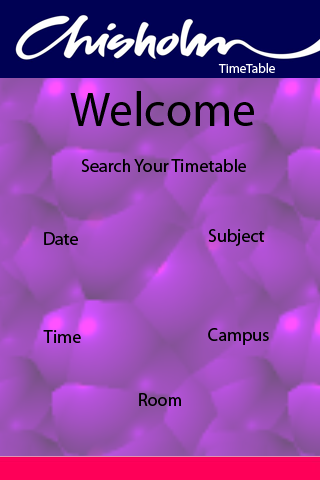
<style>
.page{position:relative;width:320px;height:480px}
.page>*{position:absolute;margin:0}
.t1{font:13.3px "MyriadPro-Regular";color:#ffffff}
.t2{font:48px "MyriadPro-Regular";color:#000000}
.t3{font:18px "MyriadPro-Regular";color:#000000}
</style>
<div class="page">
<p class="t1" style="left:218px;top:63px;width:57px;height:10px">TimeTable</p>
<p class="t2" style="left:70px;top:91px;width:184px;height:35px">Welcome</p>
<p class="t3" style="left:81px;top:159px;width:165px;height:13px">Search Your Timetable</p>
<p class="t3" style="left:44px;top:232px;width:34px;height:13px">Date</p>
<p class="t3" style="left:208px;top:229px;width:57px;height:17px">Subject</p>
<p class="t3" style="left:208px;top:328px;width:61px;height:17px">Campus</p>
<p class="t3" style="left:43px;top:330px;width:38px;height:13px">Time</p>
<p class="t3" style="left:139px;top:393px;width:42px;height:13px">Room</p>
</div>
